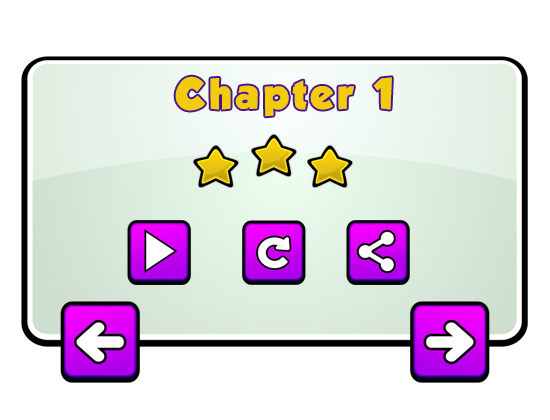
<style>
.page{position:relative;width:550px;height:420px;background:#ffffff}
.page>*{position:absolute;margin:0}
.t1{font:38px "GROBOLD";letter-spacing:0.12em;color:#f2cb0a}
</style>
<div class="page">
<p class="t1" style="left:175px;top:76px;width:217px;height:41px">Chapter 1</p>
</div>
